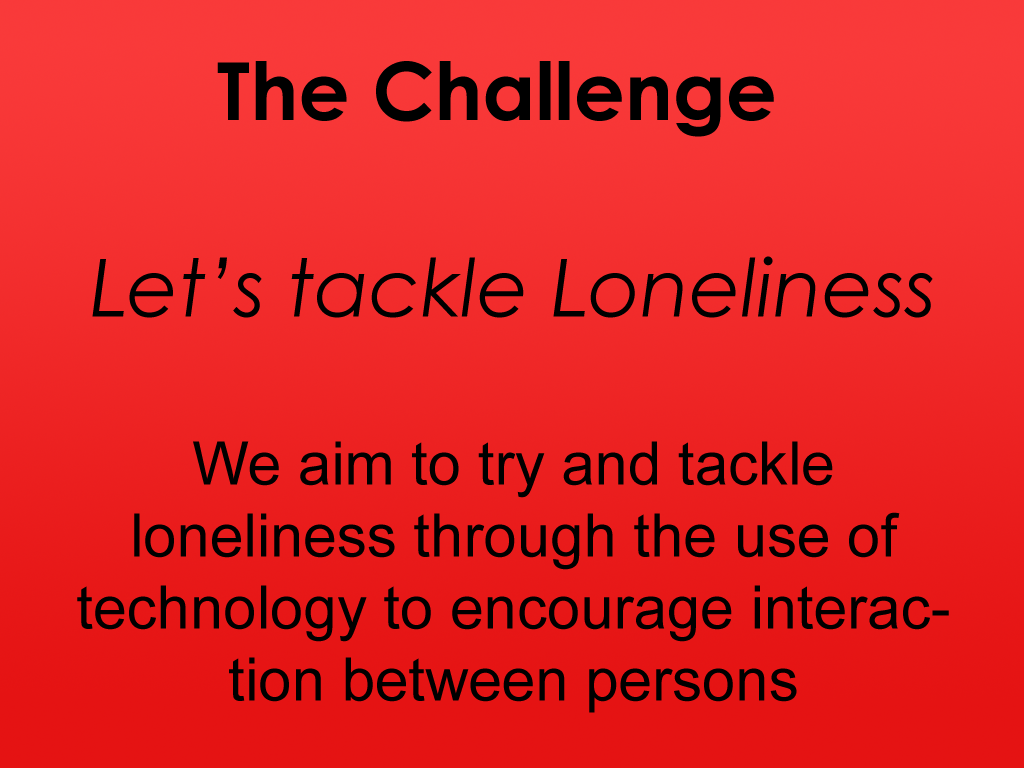
<style>
.page{position:relative;width:1024px;height:768px}
.page>*{position:absolute;margin:0}
.t1{font:80px "CenturyGothic-Bold";color:#000000}
.t2{font:60px "ArialMT";color:#000000}
.t3{font:80px "CenturyGothic-Italic";color:#000000}
</style>
<div class="page">
<p class="t1" style="left:217px;top:61px;width:557px;height:76px">The Challenge</p>
<p class="t2" style="left:77px;top:256px;width:872px;height:457px;text-align:center"><span class="t3">Let’s tackle Loneliness<br><br></span>We aim to try and tackle <br>loneliness through the use of<br>technology to encourage interaction between persons</p>
</div>
